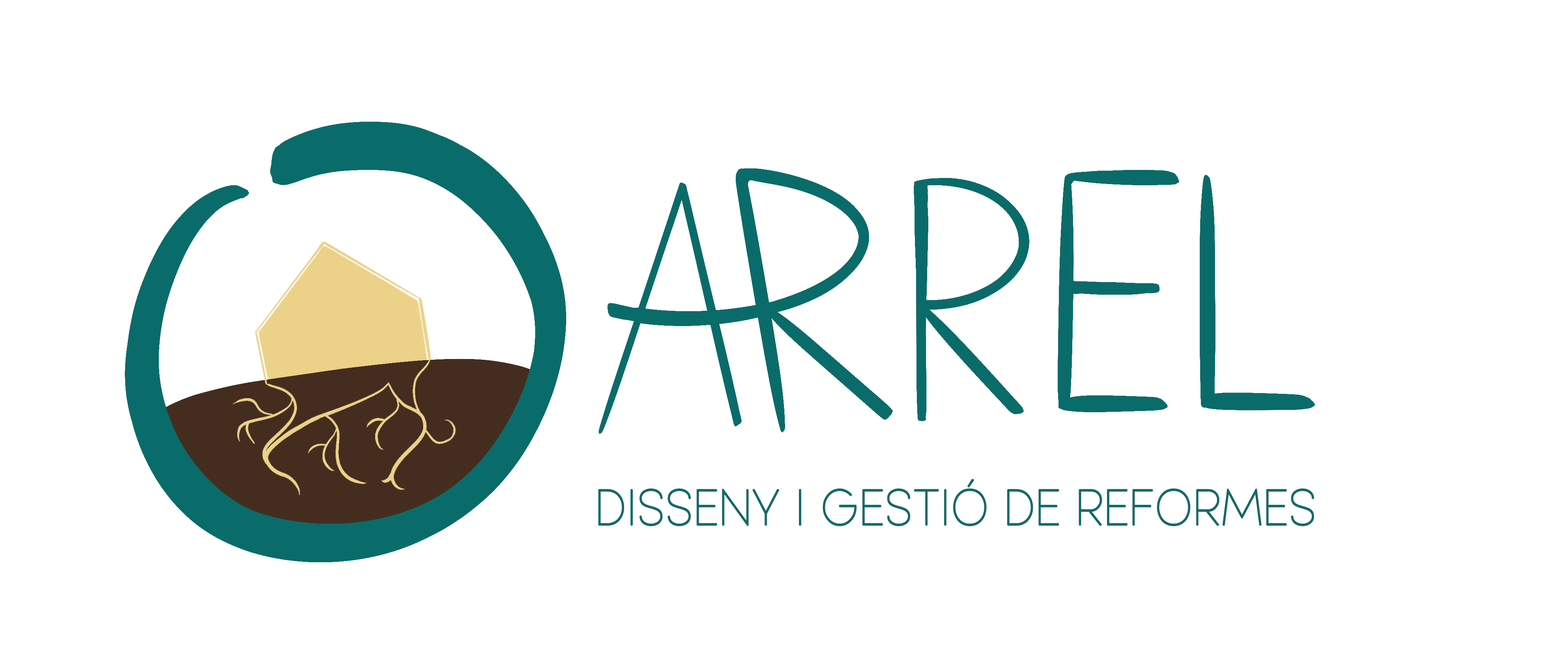
<style>
.page{position:relative;width:1568px;height:656px;background:#ffffff}
.page>*{position:absolute;margin:0}
.t1{font:50.4px "MayekaThinDemo";color:#096c6a;font-weight:bold;scale:0.89 1}
</style>
<div class="page">
<p class="t1" style="left:598px;top:479px;width:716px;height:47px">DISSENY I GESTIÓ DE REFORMES</p>
</div>
